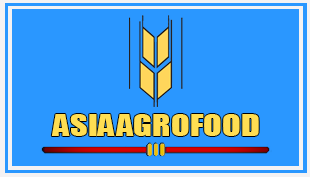
<style>
.page{position:relative;width:311px;height:177px;background:#2a97ff}
.page>*{position:absolute;margin:0}
.t1{font:28.3px "Impact";color:#ffde52;scale:1.22 1}
</style>
<div class="page">
<p class="t1" style="left:51px;top:114px;width:208px;height:22px">ASIAAGROFOOD</p>
</div>
